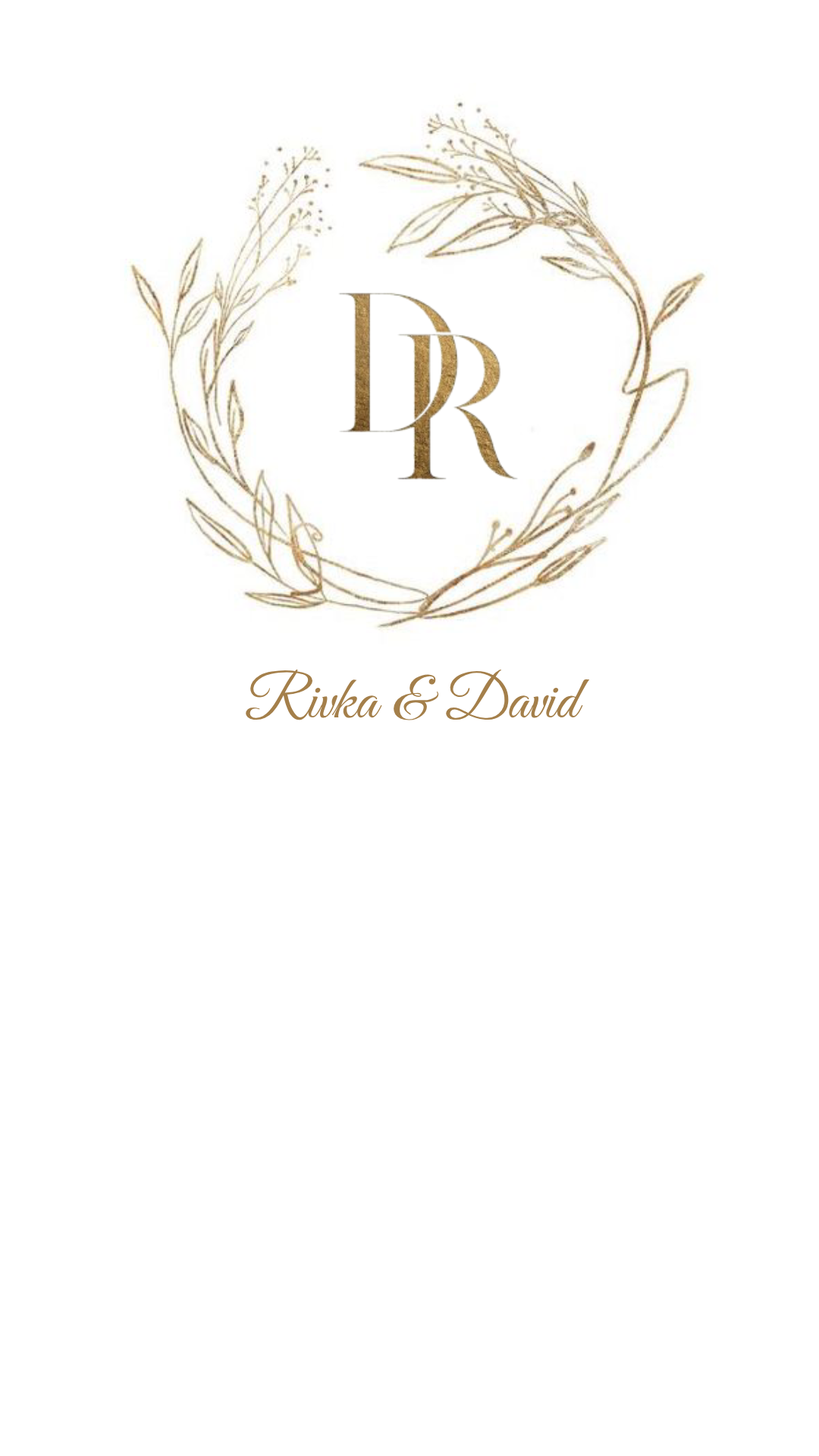
<style>
.page{position:relative;width:819px;height:1456px;background:#ffffff}
.page>*{position:absolute;margin:0}
.t1{font:60.7px "GreatVibes-Regular";color:#a47f4a}
</style>
<div class="page">
<p class="t1" style="left:246px;top:669px;width:344px;height:51px">Rivka &amp; David</p>
</div>
